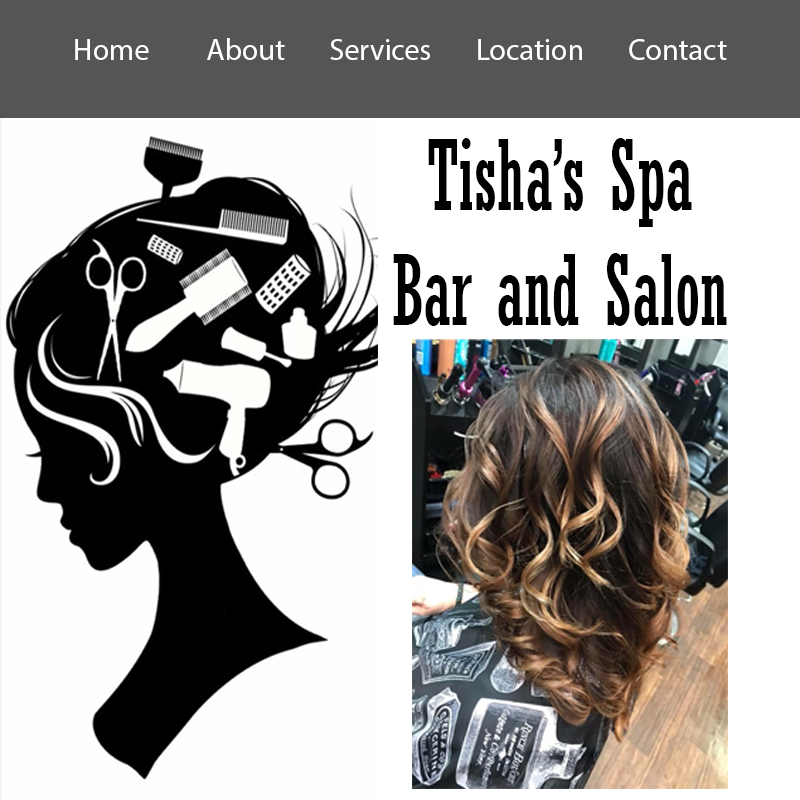
<style>
.page{position:relative;width:800px;height:800px;background:#ffffff}
.page>*{position:absolute;margin:0}
.t1{font:30px "MyriadPro-Regular";color:#ffffff}
.t2{font:95.7px "Rockwell-Condensed";color:#010000;scale:0.77 1}
</style>
<div class="page">
<p class="t1" style="left:75px;top:38px;width:652px;height:22px">Home         About       Services       Location       Contact</p>
<p class="t2" style="left:393px;top:138px;width:334px;height:188px;text-align:center">Tisha’s Spa <br>Bar and Salon</p>
</div>
